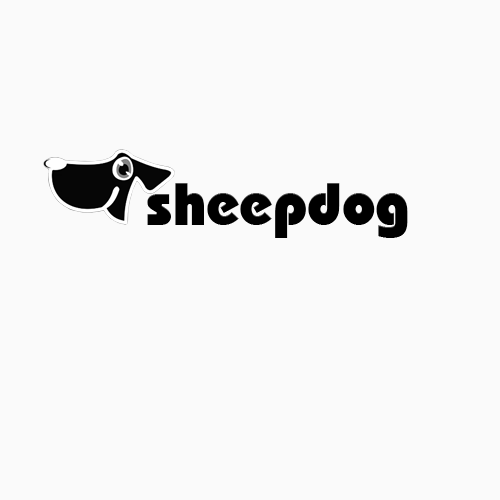
<style>
.page{position:relative;width:500px;height:500px;background:#fafafa}
.page>*{position:absolute;margin:0}
.t1{font:60px "BauhausITCbyBT-Heavy";color:#000000}
</style>
<div class="page">
<p class="t1" style="left:147px;top:183px;width:261px;height:55px">sheepdog</p>
</div>
